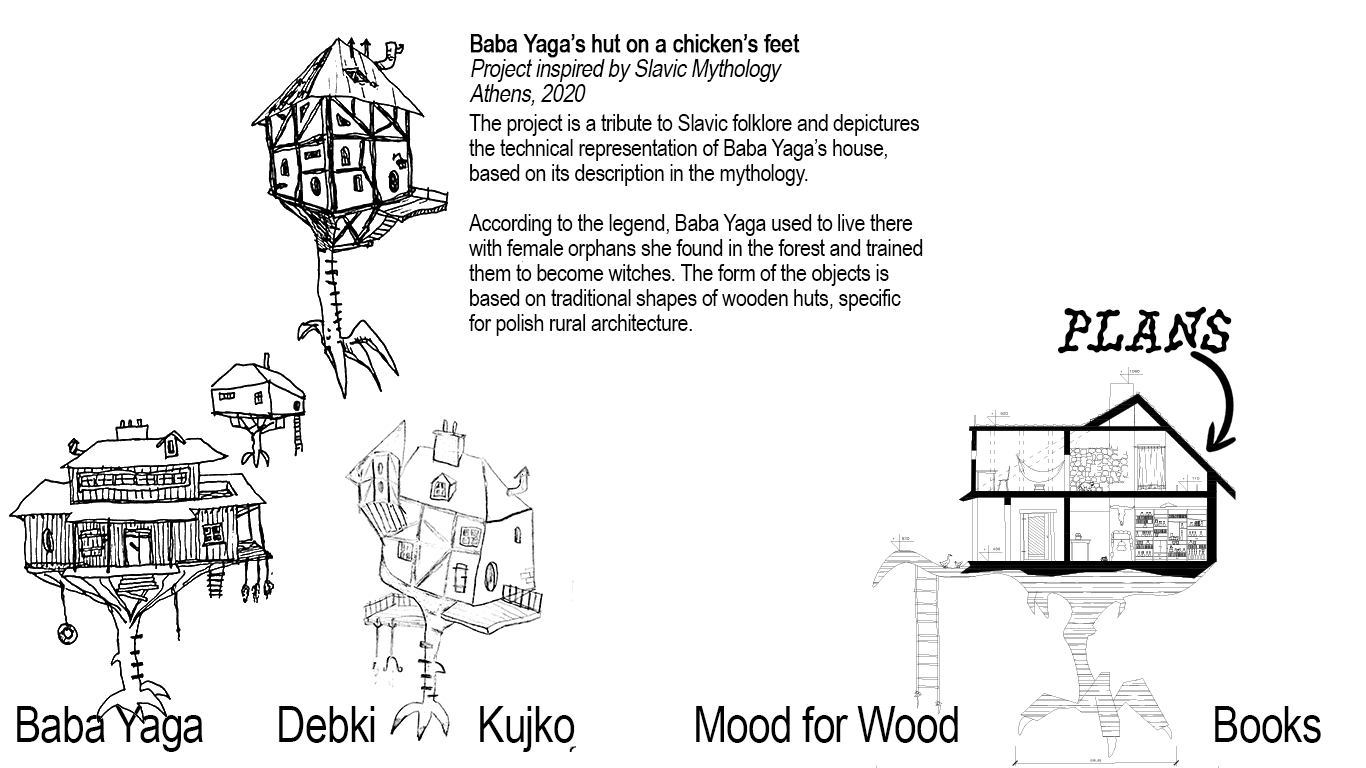
<style>
.page{position:relative;width:1366px;height:768px;background:#ffffff}
.page>*{position:absolute;margin:0}
.t1{font:25px/25px "ArialNarrow";letter-spacing:-0.02em;color:#000000;font-style:italic}
.t2{font:25px/25px "ArialNarrow";letter-spacing:-0.02em;color:#000000;font-weight:bold}
.t3{font:24px/25px "ArialNarrow";letter-spacing:-0.02em;color:#000000}
.t4{font:62px "PicNic-Regular";color:#000000}
.t5{font:50px "ArialNarrow";letter-spacing:-0.02em;color:#000000}
</style>
<div class="page">
<p class="t1" style="left:469px;top:34px;width:331px;height:72px"><span class="t2">Baba Yaga’s hut on a chicken’s feet<br></span>Project inspired by Slavic Mythology<br>Athens, 2020</p>
<p class="t3" style="left:469px;top:114px;width:454px;height:222px">The project is a tribute to Slavic folklore and depictures the technical representation of Baba Yaga’s house, based on its description in the mythology. <br><br>According to the legend, Baba Yaga used to live there with female orphans she found in the forest and trained them to become witches. The form of the objects is based on traditional shapes of wooden huts, specific for polish rural architecture.</p>
<p class="t4" style="left:1058px;top:306px;width:174px;height:48px">PLANS</p>
<p class="t5" style="left:17px;top:706px;width:1304px;height:46px">Baba Yaga      Debki      Kujko       Mood for Wood           Books</p>
</div>
